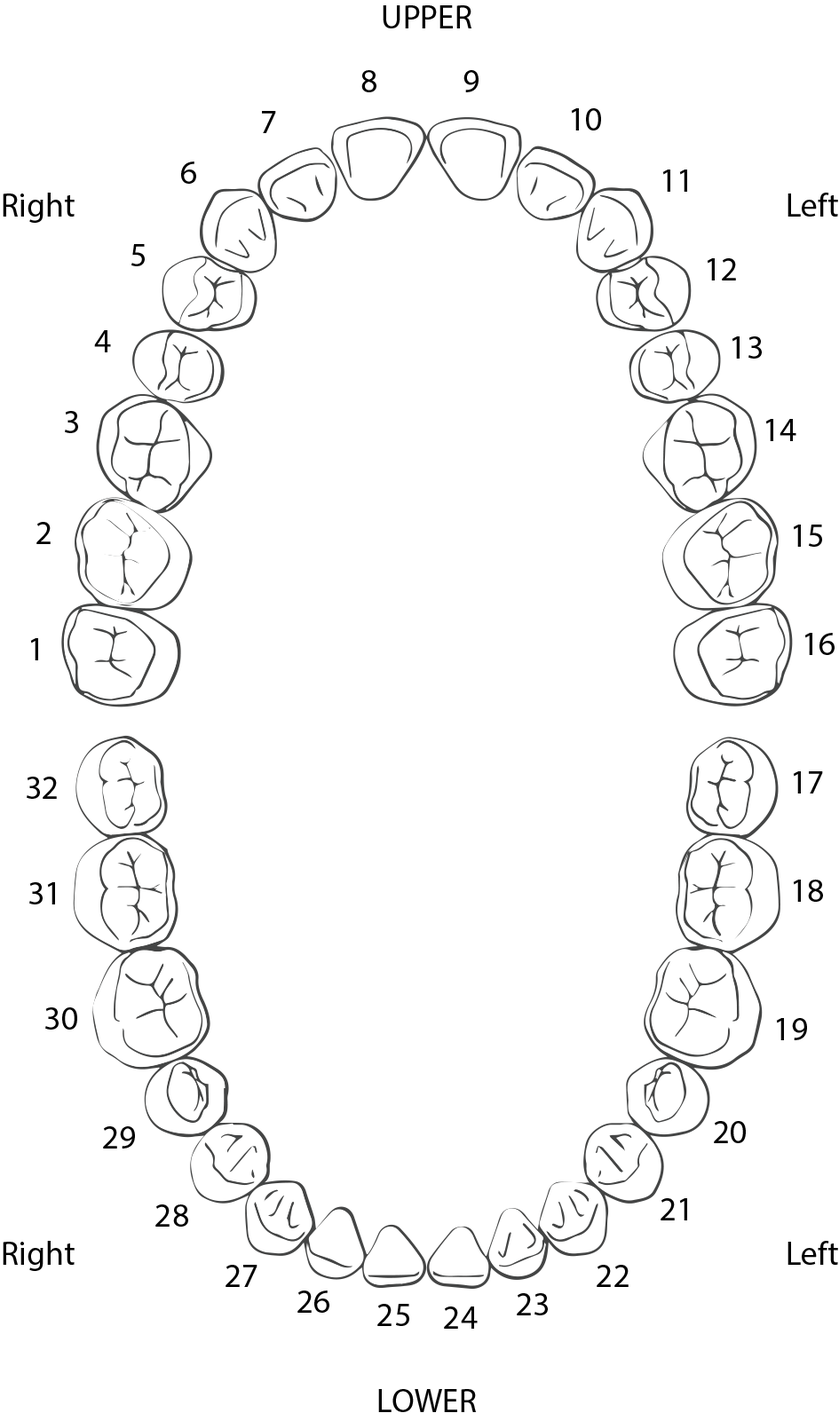
<style>
.page{position:relative;width:839px;height:1421px;background:#ffffff}
.page>*{position:absolute;margin:0}
.t1{font:33.3px "MyriadPro-Regular";color:#000000}
</style>
<div class="page">
<p class="t1" style="left:383px;top:5px;width:89px;height:23px">UPPER</p>
<p class="t1" style="left:361px;top:70px;width:15px;height:22px">8</p>
<p class="t1" style="left:463px;top:70px;width:16px;height:22px">9</p>
<p class="t1" style="left:262px;top:111px;width:14px;height:22px">7</p>
<p class="t1" style="left:571px;top:108px;width:30px;height:23px">10</p>
<p class="t1" style="left:181px;top:162px;width:15px;height:22px">6</p>
<p class="t1" style="left:662px;top:170px;width:25px;height:22px">11</p>
<p class="t1" style="left:3px;top:193px;width:72px;height:30px">Right</p>
<p class="t1" style="left:787px;top:193px;width:51px;height:24px">Left</p>
<p class="t1" style="left:131px;top:244px;width:14px;height:22px">5</p>
<p class="t1" style="left:707px;top:258px;width:29px;height:23px">12</p>
<p class="t1" style="left:94px;top:330px;width:17px;height:22px">4</p>
<p class="t1" style="left:732px;top:336px;width:30px;height:23px">13</p>
<p class="t1" style="left:65px;top:411px;width:13px;height:22px">3</p>
<p class="t1" style="left:765px;top:419px;width:31px;height:22px">14</p>
<p class="t1" style="left:36px;top:522px;width:15px;height:22px">2</p>
<p class="t1" style="left:793px;top:525px;width:29px;height:22px">15</p>
<p class="t1" style="left:30px;top:638px;width:8px;height:23px">1</p>
<p class="t1" style="left:804px;top:633px;width:31px;height:22px">16</p>
<p class="t1" style="left:793px;top:771px;width:30px;height:23px">17</p>
<p class="t1" style="left:27px;top:777px;width:30px;height:22px">32</p>
<p class="t1" style="left:793px;top:880px;width:30px;height:22px">18</p>
<p class="t1" style="left:29px;top:882px;width:26px;height:23px">31</p>
<p class="t1" style="left:45px;top:1008px;width:32px;height:22px">30</p>
<p class="t1" style="left:776px;top:1018px;width:31px;height:22px">19</p>
<p class="t1" style="left:714px;top:1121px;width:32px;height:22px">20</p>
<p class="t1" style="left:103px;top:1127px;width:32px;height:22px">29</p>
<p class="t1" style="left:155px;top:1205px;width:33px;height:22px">28</p>
<p class="t1" style="left:661px;top:1199px;width:26px;height:22px">21</p>
<p class="t1" style="left:3px;top:1241px;width:72px;height:30px">Right</p>
<p class="t1" style="left:787px;top:1241px;width:51px;height:24px">Left</p>
<p class="t1" style="left:225px;top:1265px;width:32px;height:22px">27</p>
<p class="t1" style="left:597px;top:1265px;width:32px;height:22px">22</p>
<p class="t1" style="left:297px;top:1291px;width:32px;height:22px">26</p>
<p class="t1" style="left:517px;top:1293px;width:31px;height:23px">23</p>
<p class="t1" style="left:377px;top:1304px;width:32px;height:22px">25</p>
<p class="t1" style="left:444px;top:1307px;width:34px;height:22px">24</p>
<p class="t1" style="left:378px;top:1389px;width:99px;height:23px">LOWER</p>
</div>
